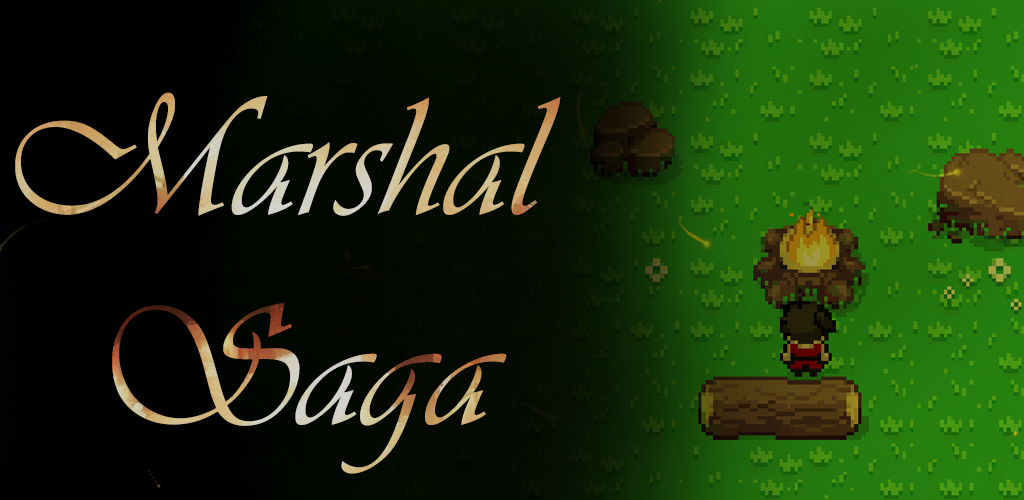
<style>
.page{position:relative;width:1024px;height:500px}
.page>*{position:absolute;margin:0}
.t1{font:175.1px "Vivaldii"}
</style>
<div class="page">
<p class="t1" style="left:15px;top:92px;width:546px;height:382px;text-align:center">Marshal <br>Saga</p>
</div>
